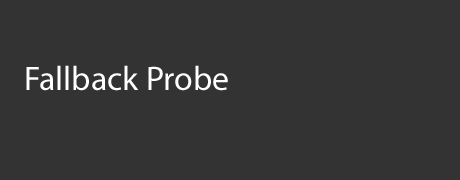
<style>
.page{position:relative;width:460px;height:180px;background:#333333}
.page>*{position:absolute;margin:0}
.t1{font:34px "ZZZMissingFontTok";color:#ffffff}
</style>
<div class="page">
<p class="t1" style="left:26px;top:65px;width:202px;height:26px">Fallback Probe</p>
</div>
